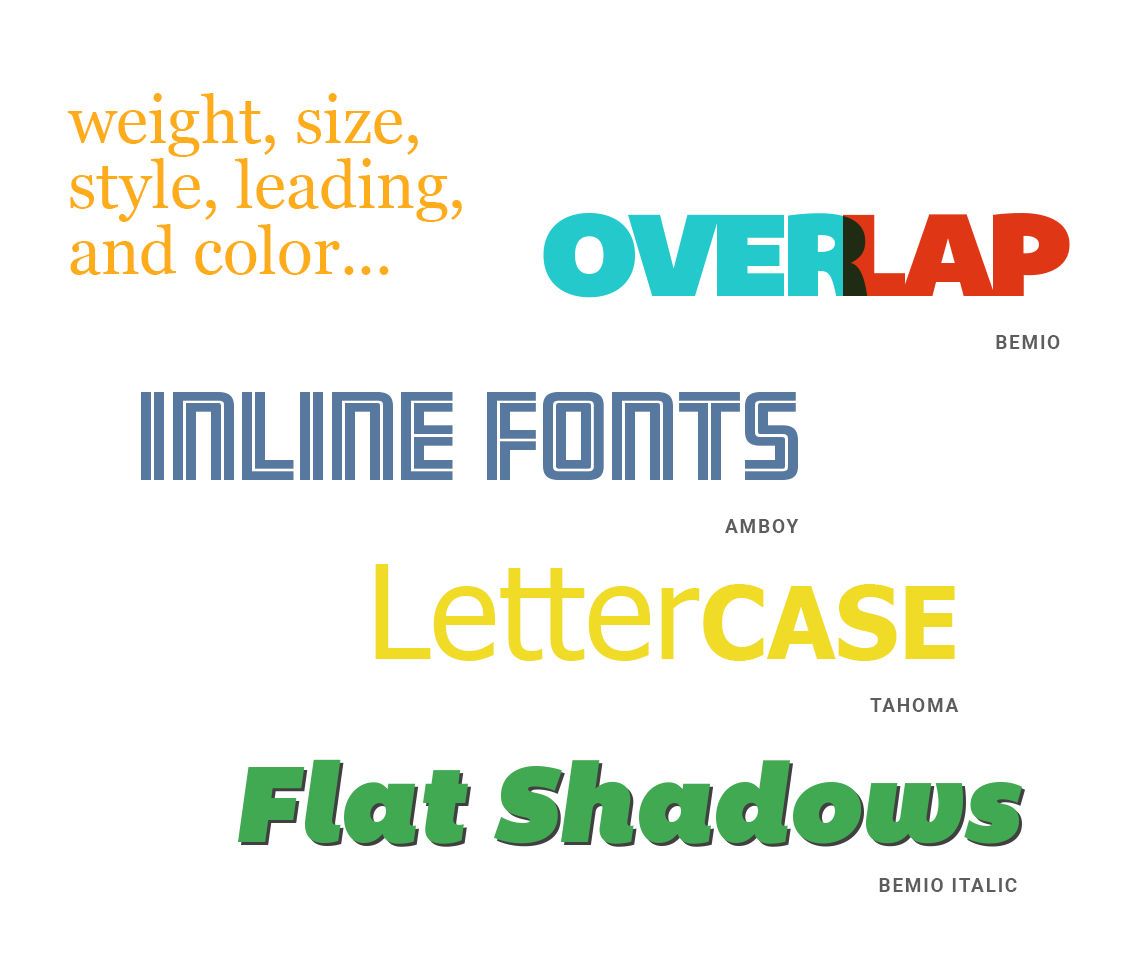
<style>
.page{position:relative;width:1140px;height:960px;background:#ffffff}
.page>*{position:absolute;margin:0}
.t1{font:65.7px/65.7px "Georgia";color:#ffac1c}
.t2{font:120px "Bemio";letter-spacing:-0.07em;color:#23c9cb}
.t3{font:120px "Bemio";letter-spacing:-0.07em;color:#df3716}
.t4{font:19.5px "Roboto-Bold";letter-spacing:0.075em;color:#5d5d5d;text-transform:uppercase}
.t5{font:110.6px "Amboy-Inline";color:#5779a0}
.t6{font:130px "Tahoma";color:#f0db26}
.t7{font:100px "Tahoma-Bold";color:#f0db26}
.t8{font:110.6px "BemioItalic";color:#41a952}
</style>
<div class="page">
<p class="t1" style="left:67px;top:93px;width:395px;height:182px">weight, size, style, leading, and color...</p>
<p class="t2" style="left:543px;top:213px;width:325px;height:85px">OVER</p>
<p class="t3" style="left:843px;top:213px;width:227px;height:83px">LAP</p>
<p class="t4" style="left:996px;top:335px;width:64px;height:14px">BEMIO</p>
<p class="t5" style="left:141px;top:392px;width:657px;height:88px">Inline Fonts</p>
<p class="t4" style="left:725px;top:519px;width:74px;height:14px">amboy</p>
<p class="t6" style="left:375px;top:564px;width:580px;height:97px">Letter<span class="t7">CASE</span></p>
<p class="t4" style="left:870px;top:698px;width:89px;height:14px">TAHOMA</p>
<p class="t8" style="left:238px;top:759px;width:784px;height:85px">Flat Shadows</p>
<p class="t4" style="left:879px;top:878px;width:138px;height:14px">BEMIO ITALIC</p>
</div>
